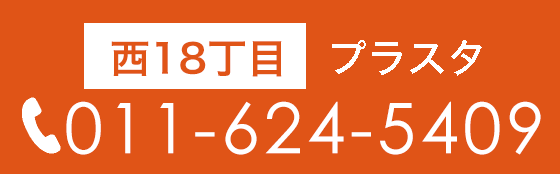
<style>
.page{position:relative;width:560px;height:174px;background:#e05417}
.page>*{position:absolute;margin:0}
.t1{font:40px "HiraKakuStd-W6";color:#e05417}
.t2{font:40px "HiraKakuStd-W5";color:#ffffff}
.t3{font:70px "CenturyGothic";letter-spacing:0.06em;color:#ffffff}
</style>
<div class="page">
<p class="t1" style="left:111px;top:41px;width:171px;height:36px">西18丁目</p>
<p class="t2" style="left:332px;top:40px;width:150px;height:36px">プラスタ</p>
<p class="t3" style="left:66px;top:101px;width:475px;height:54px">011-624-5409</p>
</div>
